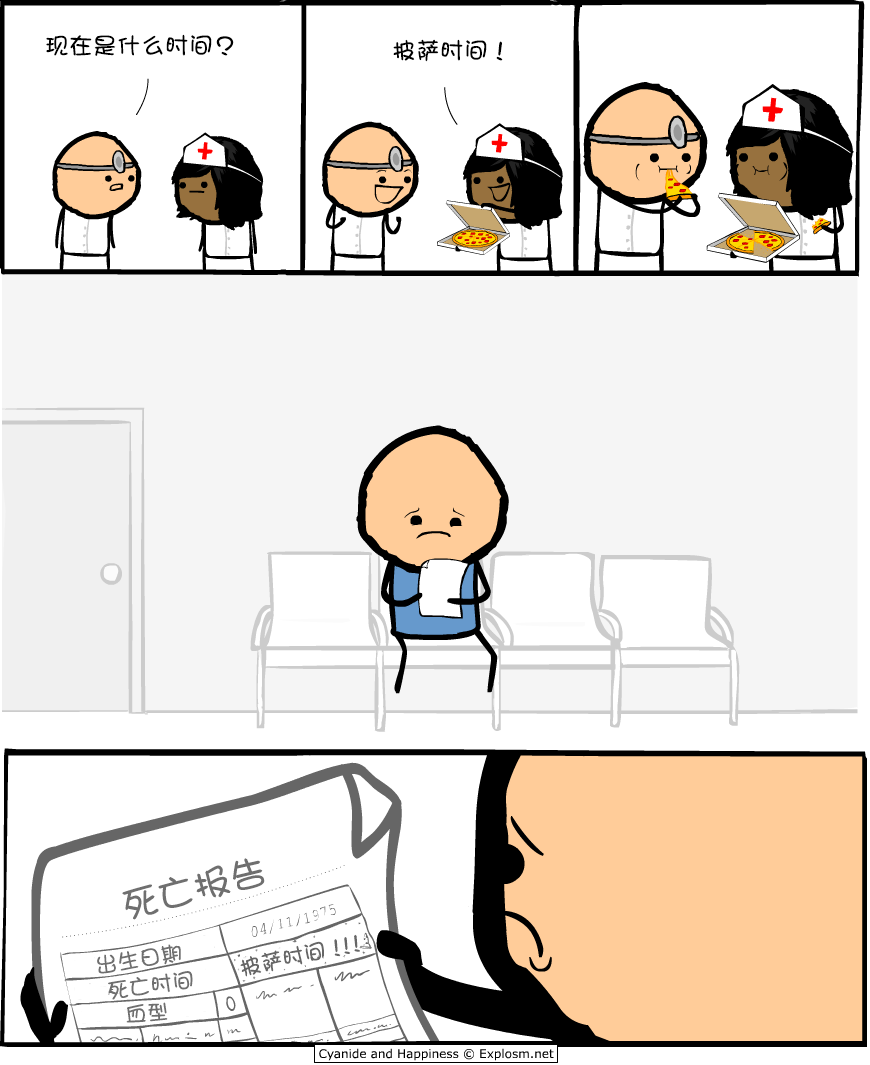
<style>
.page{position:relative;width:870px;height:1065px;background:#ffffff}
.page>*{position:absolute;margin:0}
.t1{font:24px "DFGirl";color:#000000}
.t2{font:37px "DFGirl";color:#6f6f6f}
.t3{font:22px "DFGirl";color:#666666}
.t4{font:22px "DFGirl";letter-spacing:-0.54em;color:#666666}
.t5{font:22px "DFGirl";color:#6f6f6f}
</style>
<div class="page">
<p class="t1" style="left:46px;top:34px;width:188px;height:22px">现在是什么时间？</p>
<p class="t1" style="left:393px;top:39px;width:110px;height:23px">披萨时间！</p>
<p class="t2" style="left:122px;top:858px;width:143px;height:62px;rotate:-14deg">死亡报告</p>
<p class="t3" style="left:240px;top:934px;width:120px;height:42px;rotate:-12deg">披萨时间<span class="t4">！！！</span></p>
<p class="t5" style="left:97px;top:944px;width:84px;height:30px;rotate:-9deg">出生日期</p>
<p class="t5" style="left:108px;top:971px;width:85px;height:29px;rotate:-7deg">死亡时间</p>
<p class="t5" style="left:126px;top:1002px;width:42px;height:21px;rotate:-5deg">血型</p>
</div>
